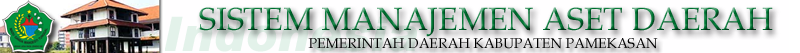
<style>
.page{position:relative;width:800px;height:53px}
.page>*{position:absolute;margin:0}
.t1{font:32px "BookAntiqua"}
.t2{font:14px "BookAntiqua";color:#000000}
</style>
<div class="page">
<p class="t1" style="left:199px;top:7px;width:574px;height:30px">SISTEM MANAJEMEN ASET DAERAH</p>
<p class="t2" style="left:308px;top:38px;width:350px;height:11px">PEMERINTAH DAERAH KABUPATEN PAMEKASAN</p>
</div>
